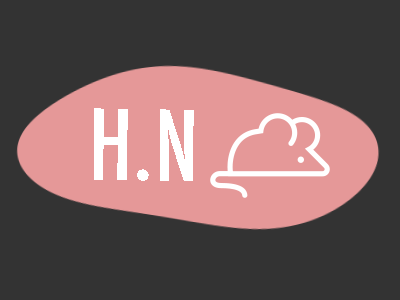
<style>
.page{position:relative;width:400px;height:300px;background:#333333}
.page>*{position:absolute;margin:0}
.t1{font:95px "Futura-CondensedMedium";letter-spacing:0.11em;color:#ffffff}
</style>
<div class="page">
<p class="t1" style="left:94px;top:108px;width:100px;height:73px;rotate:1deg">H.N</p>
</div>
